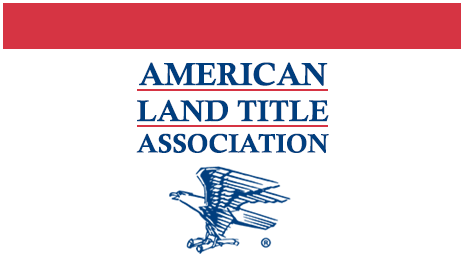
<style>
.page{position:relative;width:465px;height:260px;background:#ffffff}
.page>*{position:absolute;margin:0}
.t1{font:32px "CalisMTBol";color:#003e7e}
.t2{font:30px "CalisMTBol";color:#003e7e}
.t3{font:26.5px "CalisMTBol";color:#003e7e}
</style>
<div class="page">
<p class="t1" style="left:139px;top:62px;width:189px;height:24px">AMERICAN</p>
<p class="t2" style="left:137px;top:99px;width:192px;height:23px">LAND TITLE</p>
<p class="t3" style="left:136px;top:133px;width:193px;height:21px">ASSOCIATION</p>
</div>
